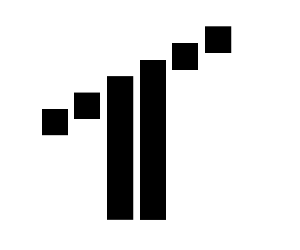
<style>
.page{position:relative;width:300px;height:250px;background:#ffffff}
.page>*{position:absolute;margin:0}
.t1{font:241.8px "TA-rb0925";letter-spacing:0.08em;color:#000000}
</style>
<div class="page">
<p class="t1" style="left:42px;top:26px;width:190px;height:194px">イ</p>
</div>
